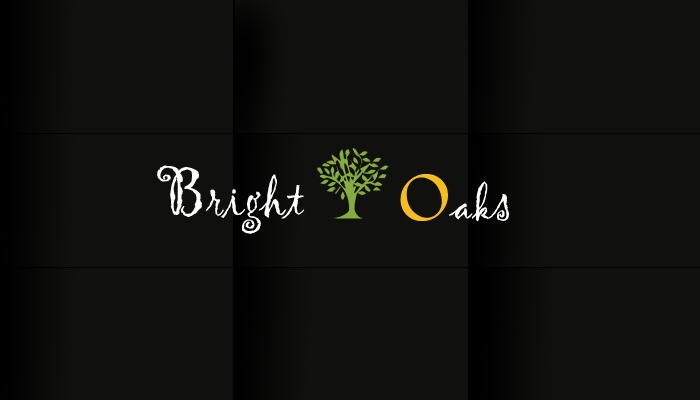
<style>
.page{position:relative;width:700px;height:400px;background:#10100e}
.page>*{position:absolute;margin:0}
.t1{font:48px "Gigi-Regular";color:#ffffff}
.t2{font:72px "Gigi-Regular";color:#ffffff}
.t3{font:72px "FootlightMTLight";color:#f5bd20}
</style>
<div class="page">
<p class="t1" style="left:157px;top:165px;width:148px;height:69px"><span class="t2">B</span>right</p>
<p class="t1" style="left:400px;top:174px;width:109px;height:48px"><span class="t3">O</span>aks</p>
</div>
